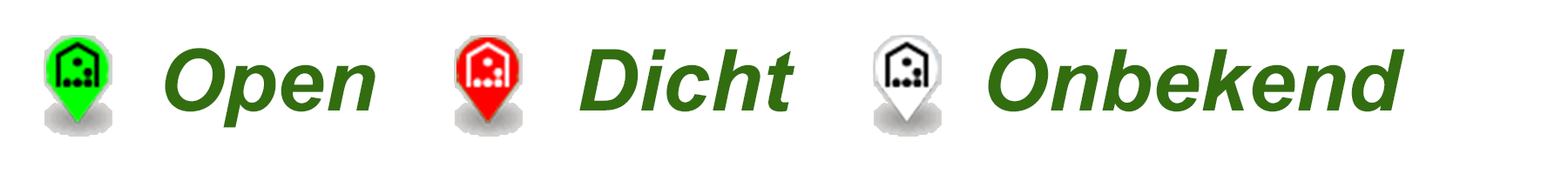
<style>
.page{position:relative;width:1568px;height:174px;background:#ffffff}
.page>*{position:absolute;margin:0}
.t1{font:85.6px "Arial-BoldItalicMT";color:#326d10}
</style>
<div class="page">
<p class="t1" style="left:165px;top:48px;width:210px;height:80px">Open</p>
<p class="t1" style="left:579px;top:49px;width:216px;height:63px">Dicht</p>
<p class="t1" style="left:988px;top:48px;width:417px;height:64px">Onbekend</p>
</div>
